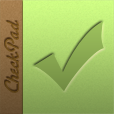
<style>
.page{position:relative;width:114px;height:114px}
.page>*{position:absolute;margin:0}
.t1{font:22px "SantaFeLetPlain";color:#68491a}
</style>
<div class="page">
<p class="t1" style="left:4px;top:20px;width:16px;height:73px;rotate:-90deg">CheckPad</p>
</div>
